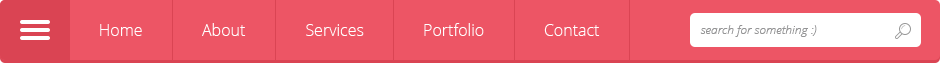
<style>
.page{position:relative;width:940px;height:63px;background:#ed5565}
.page>*{position:absolute;margin:0}
.t1{font:16px "OpenSans-Light";color:#ffffff}
.t2{font:12px "OpenSansLight-Italic";color:#959596}
</style>
<div class="page">
<p class="t1" style="left:100px;top:24px;width:42px;height:12px">Home</p>
<p class="t1" style="left:202px;top:23px;width:44px;height:13px">About</p>
<p class="t1" style="left:306px;top:24px;width:58px;height:12px">Services</p>
<p class="t1" style="left:424px;top:23px;width:60px;height:13px">Portfolio</p>
<p class="t1" style="left:544px;top:24px;width:56px;height:12px">Contact</p>
<p class="t2" style="left:700px;top:25px;width:117px;height:12px">search for something :)</p>
</div>
